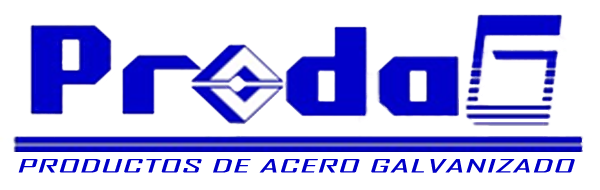
<style>
.page{position:relative;width:600px;height:190px;background:#ffffff}
.page>*{position:absolute;margin:0}
.t1{font:18.4px "AgencyFB-Reg";color:#0100c8;scale:2.66 1}
</style>
<div class="page">
<p class="t1" style="left:18px;top:159px;width:557px;height:14px">PRODUCTOS DE ACERO GALVANIZADO</p>
</div>
